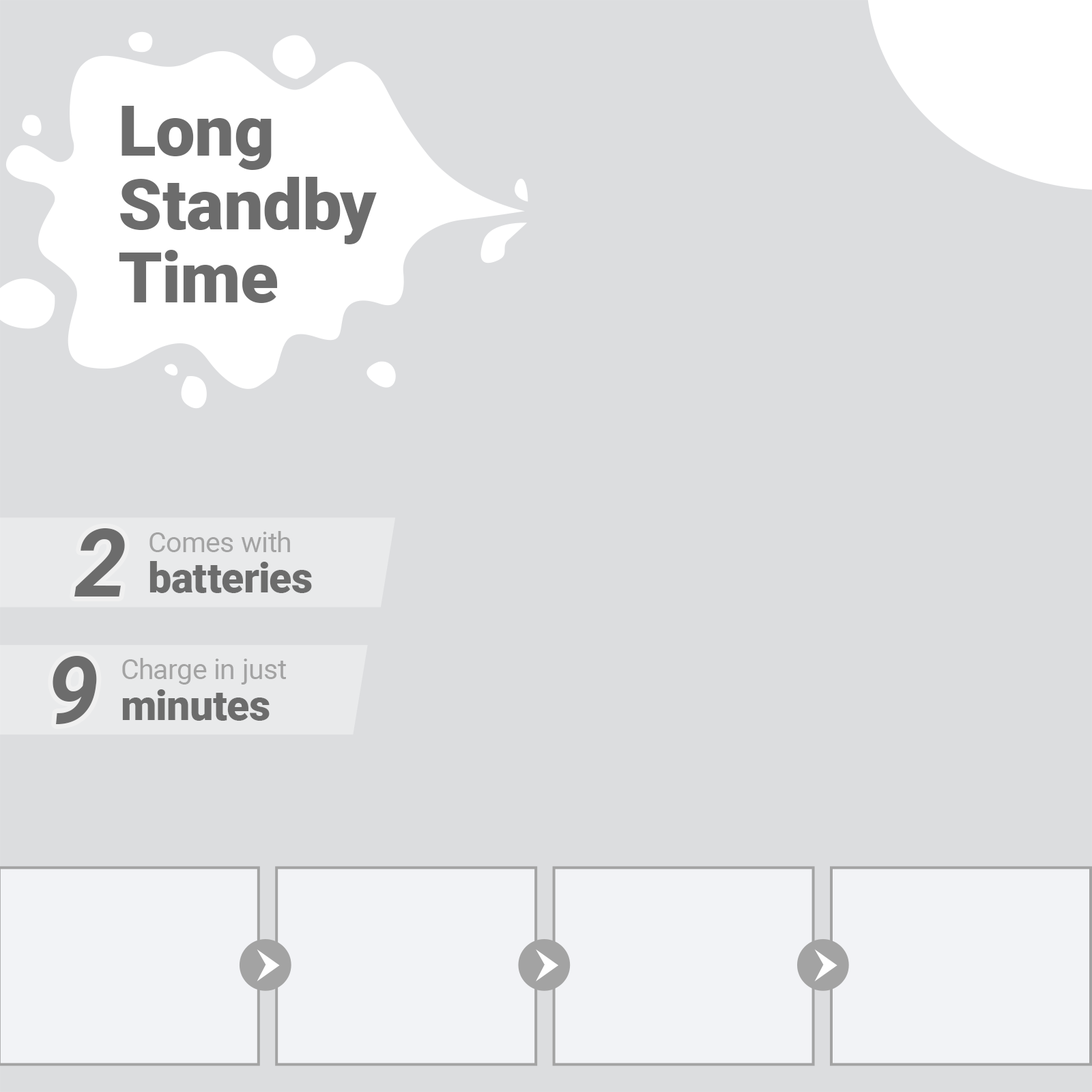
<style>
.page{position:relative;width:1092px;height:1092px;background:#dcdddf}
.page>*{position:absolute;margin:0}
.t1{font:70.1px/73.1px "Roboto-Black";color:#6c6c6c}
.t2{font:93.9px "Roboto-BoldItalic";color:#6c6c6c}
.t3{font:27.7px "Roboto-Regular";color:#a3a3a3}
.t4{font:41.3px "Roboto-Black";color:#6c6c6c}
</style>
<div class="page">
<p class="t1" style="left:119px;top:106px;width:258px;height:197px">Long<br>Standby<br>Time</p>
<p class="t2" style="left:74px;top:528px;width:51px;height:68px">2</p>
<p class="t3" style="left:149px;top:531px;width:141px;height:21px">Comes with</p>
<p class="t4" style="left:149px;top:561px;width:163px;height:32px">batteries</p>
<p class="t2" style="left:53px;top:656px;width:44px;height:68px">9</p>
<p class="t3" style="left:122px;top:658px;width:164px;height:27px">Charge in just</p>
<p class="t4" style="left:122px;top:689px;width:148px;height:32px">minutes</p>
</div>
